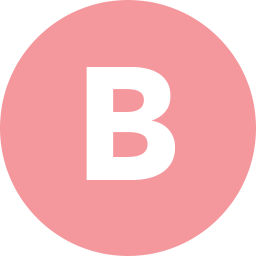
<style>
.page{position:relative;width:256px;height:256px;background:#f5989d}
.page>*{position:absolute;margin:0}
.t1{font:160px "AvenirNext-Bold";color:#ffffff}
</style>
<div class="page">
<p class="t1" style="left:86px;top:67px;width:89px;height:113px">B</p>
</div>
